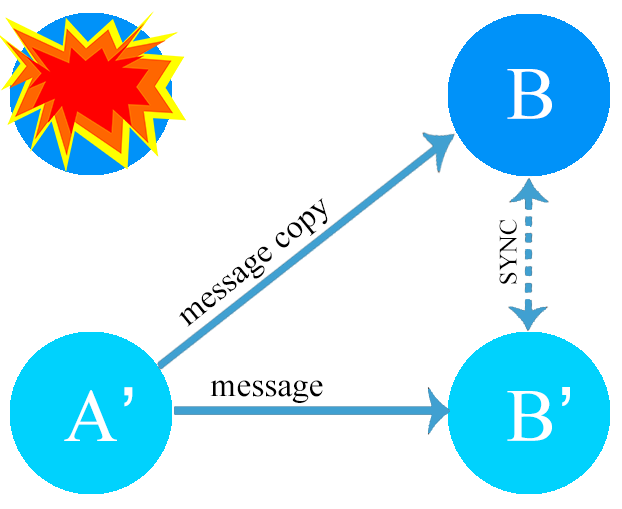
<style>
.page{position:relative;width:622px;height:509px;background:#ffffff}
.page>*{position:absolute;margin:0}
.t1{font:75px "TimesNewRomanPSMT";color:#ffffff}
.t2{font:33.3px "TimesNewRomanPSMT";color:#000000}
.t3{font:25px "TimesNewRomanPSMT";color:#000000}
.t4{font:75px "Helvetica";color:#ffffff}
</style>
<div class="page">
<p class="t1" style="left:507px;top:69px;width:45px;height:50px">B</p>
<p class="t2" style="left:179px;top:198px;width:149px;height:129px;rotate:-39deg">message copy</p>
<p class="t3" style="left:499px;top:219px;width:18px;height:65px;rotate:-90deg">SYNC</p>
<p class="t1" style="left:64px;top:387px;width:69px;height:54px">A<span class="t4">’</span></p>
<p class="t2" style="left:210px;top:380px;width:113px;height:23px">message</p>
<p class="t1" style="left:507px;top:387px;width:63px;height:54px">B<span class="t4">’</span></p>
</div>
